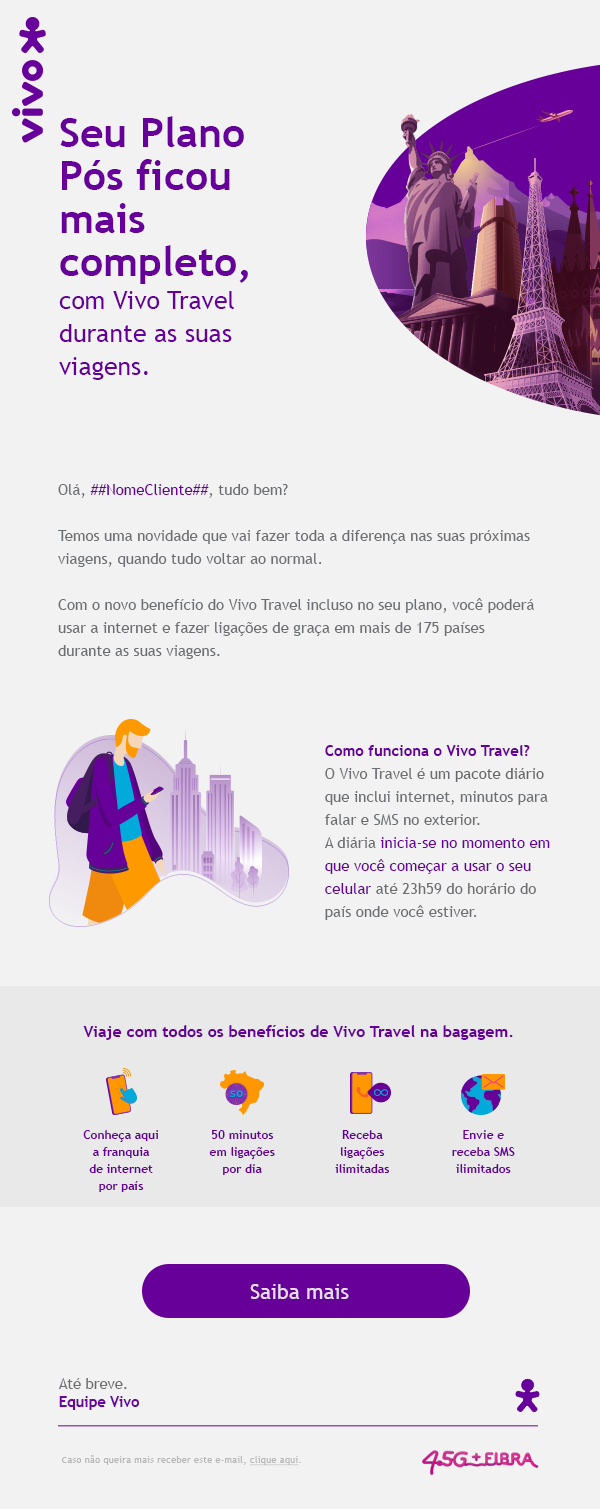
<style>
.page{position:relative;width:600px;height:1509px;background:#f2f2f2}
.page>*{position:absolute;margin:0}
.t1{font:25px/33px "TrebuchetMS";color:#67009b}
.t2{font:41px/43px "TrebuchetMS-Bold";color:#67009b}
.t3{font:15px/23px "TrebuchetMS";color:#6d6e71}
.t4{font:15px/23px "TrebuchetMS";color:#660099}
.t5{font:15px/36px "TrebuchetMS-Bold";color:#67009b}
.t6{font:15px/23px "TrebuchetMS-Bold";color:#67009b}
.t7{font:15px/23px "TrebuchetMS";color:#666666}
.t8{font:15px/23px "TrebuchetMS";color:#67009b}
.t9{font:16px "TrebuchetMS-Bold";color:#660099}
.t10{font:12px/17px "TrebuchetMS-Bold";color:#660099}
.t11{font:21px "TrebuchetMS";color:#e6dded}
.t12{font:15px/18.8px "TrebuchetMS-Bold";letter-spacing:-0.01em;color:#6a069d}
.t13{font:15px/33px "TrebuchetMS";letter-spacing:-0.01em;color:#6d6e71}
.t14{font:15px/18.8px "TrebuchetMS";letter-spacing:-0.01em;color:#6d6e71}
.t15{font:9px "TrebuchetMS";letter-spacing:0.04em;color:#b6b6b6}
.t16{font:9px "TrebuchetMS";letter-spacing:0.04em;color:#b6b6b6;text-decoration:underline}
</style>
<div class="page">
<p class="t1" style="left:59px;top:116px;width:189px;height:264px"><span class="t2">Seu Plano Pós ficou mais completo,<br></span>com Vivo Travel durante as suas viagens.</p>
<p class="t3" style="left:58px;top:484px;width:476px;height:175px">Olá, <span class="t4">##NomeCliente##</span>, tudo bem?<br><br>Temos uma novidade que vai fazer toda a diferença nas suas próximas viagens, quando tudo voltar ao normal.<br><br>Com o novo benefício do Vivo Travel incluso no seu plano, você poderá usar a internet e fazer ligações de graça em mais de 175 países durante as suas viagens.</p>
<p class="t3" style="left:325px;top:745px;width:225px;height:175px"><span class="t5">Como funciona o Viv</span><span class="t6">o Travel?<br></span>O Vivo Travel é um <span class="t7">pacote diário </span>que inclui internet, minutos para falar e SMS no exterior.<br>A diária <span class="t8">inicia-se no momento em que você começar a usar o seu celular </span>até 23h59 do horário do país onde você estiver.</p>
<p class="t9" style="left:83px;top:1025px;width:430px;height:15px">Viaje com todos os benefícios de Vivo Travel na bagagem.</p>
<p class="t10" style="left:83px;top:1130px;width:75px;height:62px;text-align:center">Conheça aqui <br>a franquia <br>de internet <br>por país</p>
<p class="t10" style="left:209px;top:1130px;width:66px;height:45px;text-align:center">50 minutos<br>em ligações <br>por dia</p>
<p class="t10" style="left:335px;top:1130px;width:55px;height:43px;text-align:center">Receba<br>ligações ilimitadas</p>
<p class="t10" style="left:452px;top:1130px;width:63px;height:43px;text-align:center">Envie e <br>receba SMS<br>ilimitados</p>
<p class="t11" style="left:250px;top:1284px;width:99px;height:15px">Saiba mais</p>
<p class="t12" style="left:59px;top:1378px;width:81px;height:32px"><span class="t13">At</span><span class="t14">é breve.<br></span>Equipe Vivo</p>
<p class="t15" style="left:62px;top:1455px;width:239px;height:11px">Caso não queira mais receber este e-mail, <span class="t16">clique aqui</span>.</p>
</div>
